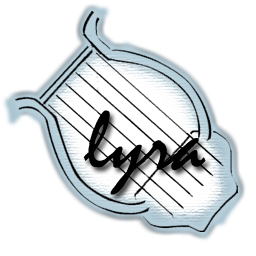
<style>
.page{position:relative;width:256px;height:256px;background:#ffffff}
.page>*{position:absolute;margin:0}
.t1{font:85.7px "Mistral";color:#010101}
</style>
<div class="page">
<p class="t1" style="left:83px;top:110px;width:123px;height:85px">lyra</p>
</div>
